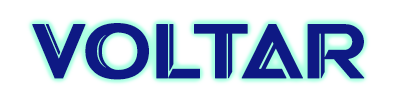
<style>
.page{position:relative;width:400px;height:100px;background:#ffffff}
.page>*{position:absolute;margin:0}
.t1{font:75px "SweraDemoShadowed";color:#0e1984;font-weight:bold}
</style>
<div class="page">
<p class="t1" style="left:32px;top:23px;width:333px;height:57px">Voltar</p>
</div>
